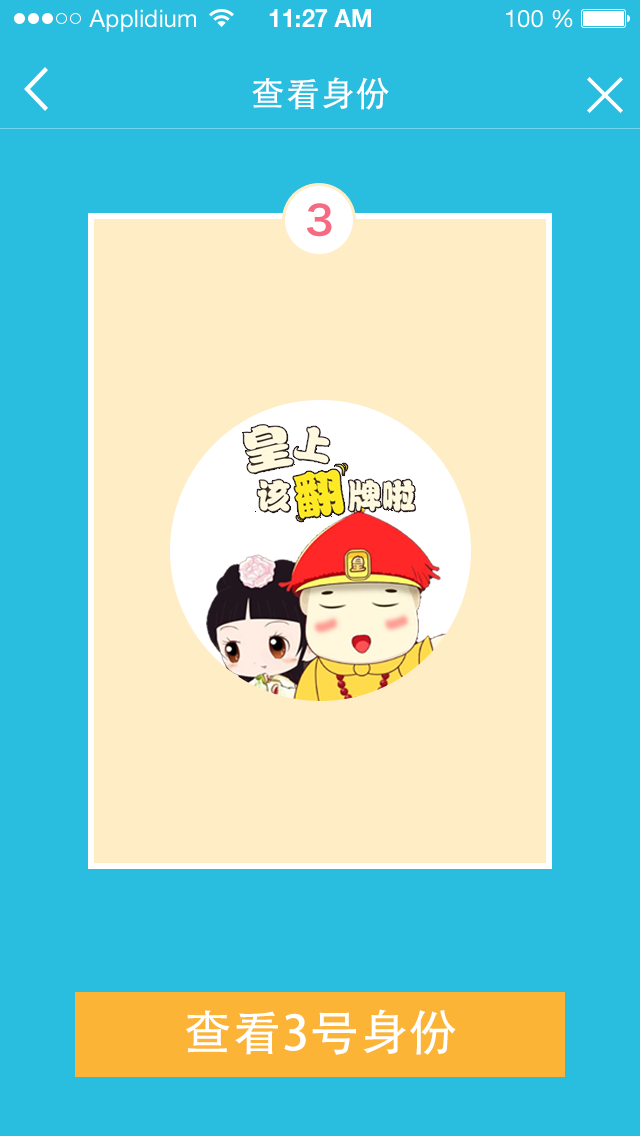
<style>
.page{position:relative;width:640px;height:1136px;background:#29bde0}
.page>*{position:absolute;margin:0}
.t1{font:34px "AdobeHeitiStd-Regular";letter-spacing:0.025em;color:#ffffff}
.t2{font:40px "HiraginoSansGB-W6";letter-spacing:0.025em;color:#f56b81}
.t3{font:48px "AdobeHeitiStd-Regular";letter-spacing:0.025em;color:#ffffff}
</style>
<div class="page">
<p class="t1" style="left:252px;top:77px;width:137px;height:33px">查看身份</p>
<p class="t2" style="left:306px;top:203px;width:26px;height:34px">3</p>
<p class="t3" style="left:186px;top:1009px;width:270px;height:46px">查看3号身份</p>
</div>
